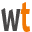
<style>
.page{position:relative;width:32px;height:32px;background:#ffffff}
.page>*{position:absolute;margin:0}
.t1{font:45px "ExpoSansPro-Bold";color:#494747;scale:0.57 1}
.t2{font:45px "ExpoSansPro-Bold";color:#f17704;scale:0.57 1}
</style>
<div class="page">
<p class="t1" style="left:1px;top:2px;width:29px;height:30px">w<span class="t2">t</span></p>
</div>
